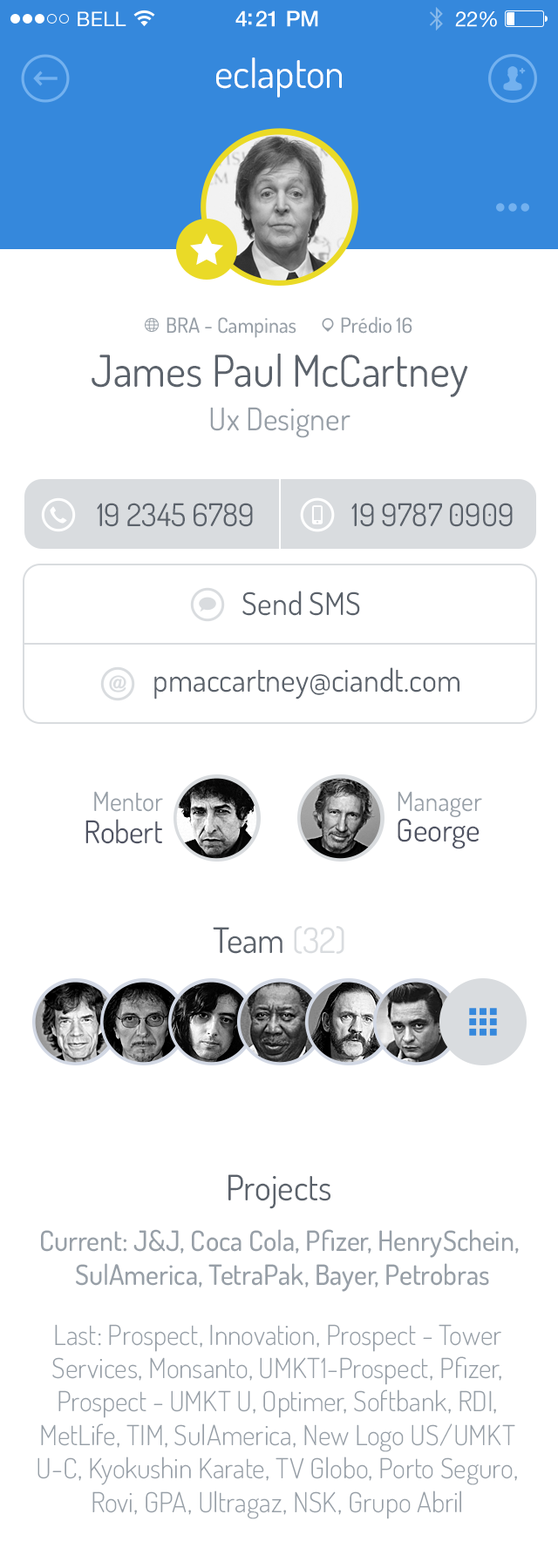
<style>
.page{position:relative;width:558px;height:1568px;background:#ffffff}
.page>*{position:absolute;margin:0}
.t1{font:40.1px "Dosis-Book";color:#ffffff}
.t2{font:20.9px "Dosis-Medium";color:#979fa7}
.t3{font:43.6px "Dosis-Book";color:#5b626b}
.t4{font:31.4px "Dosis-Book";color:#979fa7}
.t5{font:31.4px "Dosis-Book";color:#5b626b}
.t6{font:26.1px "Dosis-Book";color:#979fa7}
.t7{font:31.4px "Dosis-Book";color:#505463}
.t8{font:34.8px "Dosis-Book";color:#5b626b}
.t9{font:34.8px "Dosis-Book";color:#d9dcdf}
.t10{font:27.9px "Dosis-Medium";color:#979fa7}
.t11{font:27.9px "Dosis-Light";color:#979fa7}
</style>
<div class="page">
<p class="t1" style="left:216px;top:57px;width:125px;height:41px">eclapton</p>
<p class="t2" style="left:166px;top:317px;width:130px;height:21px">BRA - Campinas</p>
<p class="t2" style="left:341px;top:316px;width:71px;height:18px">Prédio 16</p>
<p class="t3" style="left:91px;top:353px;width:377px;height:44px">James Paul McCartney</p>
<p class="t4" style="left:210px;top:407px;width:140px;height:31px">Ux Designer</p>
<p class="t5" style="left:97px;top:503px;width:156px;height:24px">19 2345 6789</p>
<p class="t5" style="left:351px;top:503px;width:161px;height:24px">19 9787 0909</p>
<p class="t5" style="left:242px;top:591px;width:118px;height:25px">Send SMS</p>
<p class="t5" style="left:154px;top:667px;width:305px;height:33px">pmaccartney@ciandt.com</p>
<p class="t6" style="left:94px;top:791px;width:69px;height:21px">Mentor</p>
<p class="t6" style="left:397px;top:791px;width:85px;height:26px">Manager</p>
<p class="t7" style="left:85px;top:819px;width:77px;height:25px">Robert</p>
<p class="t7" style="left:397px;top:818px;width:82px;height:31px">George</p>
<p class="t8" style="left:213px;top:926px;width:131px;height:28px">Team <span class="t9">(32)</span></p>
<p class="t8" style="left:228px;top:1174px;width:102px;height:35px">Projects</p>
<p class="t10" style="left:41px;top:1229px;width:477px;height:63px;text-align:center">Current: J&amp;J, Coca Cola, Pfizer, HenrySchein, <br>SulAmerica, TetraPak, Bayer, Petrobras</p>
<p class="t11" style="left:37px;top:1324px;width:480px;height:195px;text-align:center">Last: Prospect, Innovation, Prospect - Tower Services, Monsanto, UMKT1-Prospect, Pfizer, Prospect - UMKT U, Optimer, Softbank, RDI, MetLife, TIM, SulAmerica, New Logo US/UMKT U-C, Kyokushin Karate, TV Globo, Porto Seguro, Rovi, GPA, Ultragaz, NSK, Grupo Abril</p>
</div>
